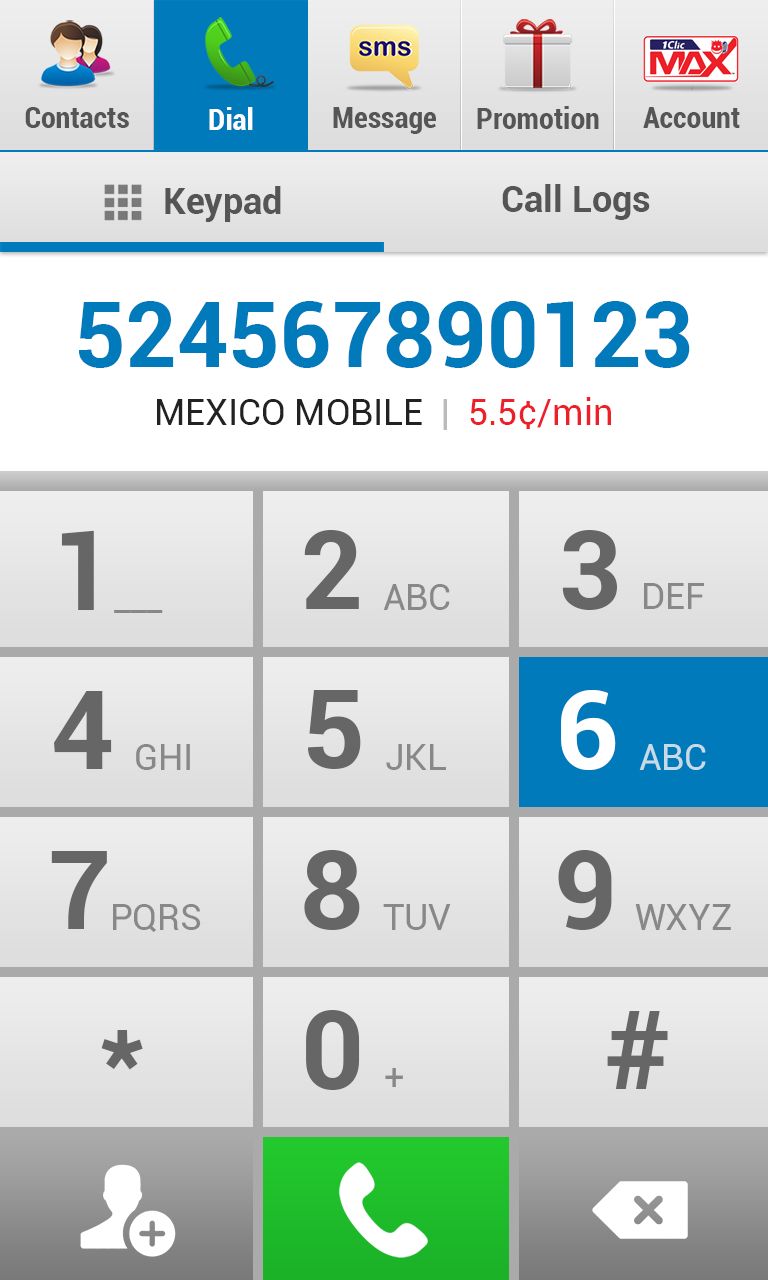
<style>
.page{position:relative;width:768px;height:1280px}
.page>*{position:absolute;margin:0}
.t1{font:30px "Roboto-BoldCondensed";color:#555555}
.t2{font:30px "Roboto-BoldCondensed";color:#ffffff}
.t3{font:36px "Roboto-Bold";color:#555555}
.t4{font:90px "Roboto-Bold";color:#007abb}
.t5{font:36px "Roboto-Regular";color:#222222}
.t6{font:36px "Roboto-Regular";color:#bbbbbb}
.t7{font:36px "Roboto-Regular";color:#ec2028}
.t8{font:110px "Roboto-Bold";color:#666666}
.t9{font:36px "Roboto-Regular";color:#888888}
.t10{font:110px "Roboto-Bold";color:#ffffff}
.t11{font:36px "Roboto-Regular";color:#c6dbe6}
</style>
<div class="page">
<p class="t1" style="left:25px;top:107px;width:104px;height:21px">Contacts</p>
<p class="t2" style="left:209px;top:107px;width:44px;height:23px">Dial</p>
<p class="t1" style="left:333px;top:107px;width:103px;height:27px">Message</p>
<p class="t1" style="left:477px;top:106px;width:122px;height:23px">Promotion</p>
<p class="t1" style="left:643px;top:107px;width:97px;height:21px">Account</p>
<p class="t3" style="left:502px;top:184px;width:148px;height:36px">Call Logs</p>
<p class="t3" style="left:165px;top:186px;width:116px;height:36px">Keypad</p>
<p class="t4" style="left:79px;top:301px;width:611px;height:67px">524567890123</p>
<p class="t5" style="left:157px;top:397px;width:454px;height:33px">MEXICO MOBILE<span class="t6">  |  </span><span class="t7">5.5¢/min</span></p>
<p class="t8" style="left:61px;top:530px;width:33px;height:80px">1</p>
<p class="t8" style="left:304px;top:530px;width:55px;height:79px">2</p>
<p class="t8" style="left:562px;top:530px;width:55px;height:80px">3</p>
<p class="t9" style="left:383px;top:584px;width:67px;height:26px">ABC</p>
<p class="t9" style="left:644px;top:583px;width:60px;height:26px">DEF</p>
<p class="t9" style="left:114px;top:610px;width:49px;height:3px">___</p>
<p class="t8" style="left:54px;top:691px;width:58px;height:78px">4</p>
<p class="t8" style="left:308px;top:690px;width:53px;height:79px">5</p>
<p class="t10" style="left:561px;top:690px;width:55px;height:80px">6</p>
<p class="t9" style="left:136px;top:744px;width:54px;height:26px">GHI</p>
<p class="t9" style="left:386px;top:744px;width:60px;height:26px">JKL</p>
<p class="t11" style="left:639px;top:744px;width:67px;height:26px">ABC</p>
<p class="t8" style="left:51px;top:851px;width:56px;height:78px">7</p>
<p class="t8" style="left:304px;top:850px;width:56px;height:80px">8</p>
<p class="t8" style="left:558px;top:850px;width:54px;height:80px">9</p>
<p class="t9" style="left:113px;top:904px;width:88px;height:28px">PQRS</p>
<p class="t9" style="left:383px;top:904px;width:68px;height:26px">TUV</p>
<p class="t9" style="left:635px;top:904px;width:96px;height:26px">WXYZ</p>
<p class="t8" style="left:306px;top:1010px;width:54px;height:80px">0</p>
<p class="t8" style="left:607px;top:1011px;width:61px;height:78px">#</p>
<p class="t8" style="left:101px;top:1030px;width:42px;height:40px">*</p>
<p class="t9" style="left:385px;top:1068px;width:18px;height:19px">+</p>
</div>
